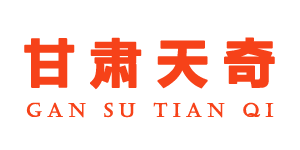
<style>
.page{position:relative;width:300px;height:150px;background:#ffffff}
.page>*{position:absolute;margin:0}
.t1{font:50.7px "MicrosoftYaHei-Bold";letter-spacing:0.288em;color:#f64219;font-weight:bold}
.t2{font:18.7px "Castellar";letter-spacing:0.288em;color:#f64219;font-weight:bold}
</style>
<div class="page">
<p class="t1" style="left:24px;top:37px;width:251px;height:53px">甘肃天奇</p>
<p class="t2" style="left:26px;top:102px;width:248px;height:16px">gan su tian qi</p>
</div>
